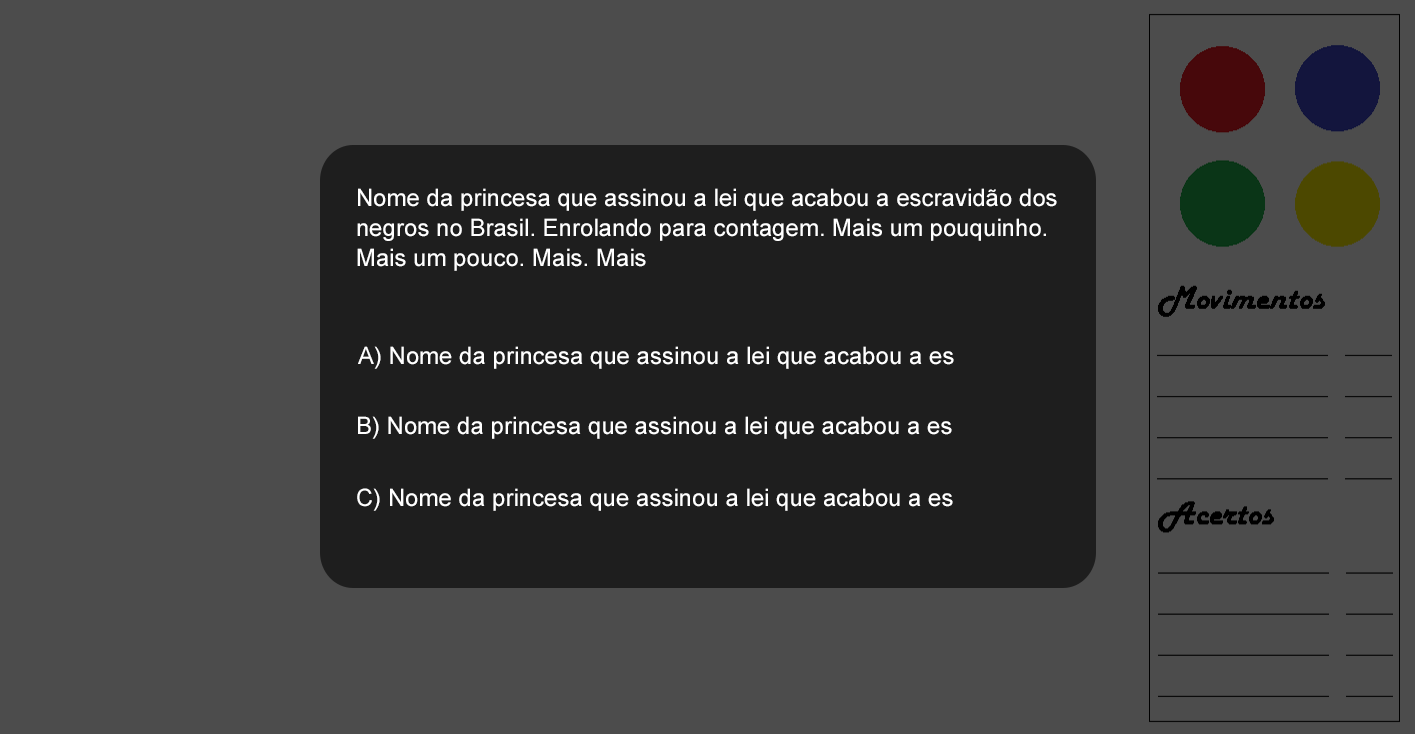
<style>
.page{position:relative;width:1415px;height:734px;background:#4c4c4c}
.page>*{position:absolute;margin:0}
.t1{font:24px/30px "ArialMT";color:#ffffff}
.t2{font:24px "ArialMT";color:#ffffff}
</style>
<div class="page">
<p class="t1" style="left:357px;top:188px;width:700px;height:83px">Nome da princesa que assinou a lei que acabou a escravidão dos negros no Brasil. Enrolando para contagem. Mais um pouquinho. Mais um pouco. Mais. Mais</p>
<p class="t2" style="left:358px;top:346px;width:596px;height:23px">A) Nome da princesa que assinou a lei que acabou a es</p>
<p class="t2" style="left:358px;top:416px;width:594px;height:23px">B) Nome da princesa que assinou a lei que acabou a es</p>
<p class="t2" style="left:357px;top:488px;width:596px;height:23px">C) Nome da princesa que assinou a lei que acabou a es</p>
</div>
